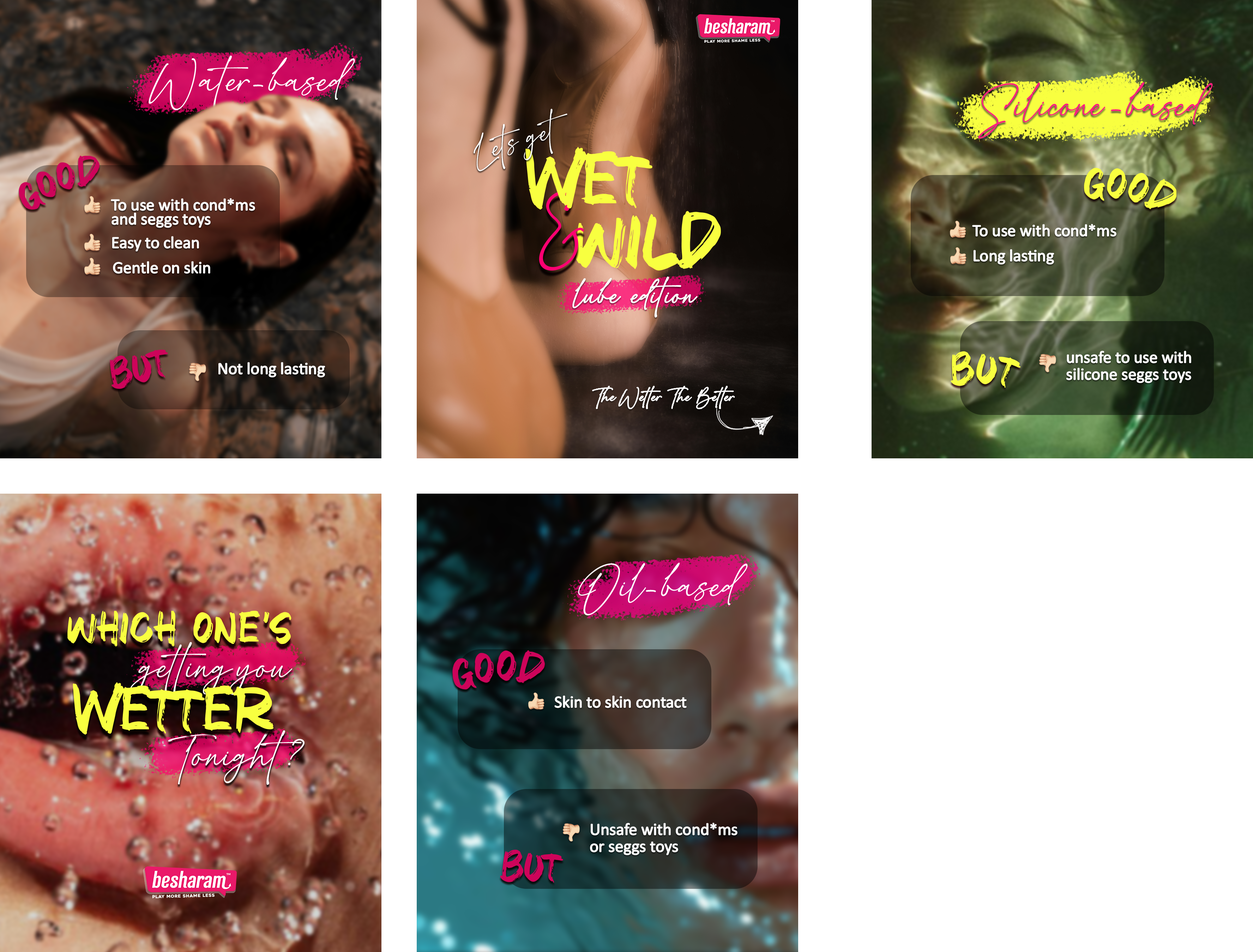
<style>
.page{position:relative;width:1253px;height:952px;background:#ffffff}
.page>*{position:absolute;margin:0}
.t1{font:29px/6.9px "BreathneyDemo";color:#ffffff}
.t2{font:29px/35.3px "BreathneyDemo";color:#fe1f80}
.t3{font:78.7px "Brat-Town";color:#f8ff40}
.t4{font:42.2px "Brat-Town";letter-spacing:-0.025em;color:#cd045a}
.t5{font:45.4px "Brat-Town";letter-spacing:-0.025em;color:#f8ff40}
.t6{font:77.6px "BreathneyDemo";color:#ff0072}
.t7{font:16.9px/14.1px "Calibri";color:#ffffff}
.t8{font:16.9px "Calibri";color:#ffffff}
.t9{font:21.4px/5.1px "BreathneyDemo";color:#ffffff}
.t10{font:43.2px "Brat-Town";color:#cd045a}
.t11{font:16.9px/16.9px "Calibri";color:#ffffff}
.t12{font:12.1px/2.9px "BreathneyDemo";color:#fefefe}
.t13{font:12.1px/2.9px "BreathneyDemo";color:#ffffff}
.t14{font:46.2px "Brat-Town";color:#f8ff40}
.t15{font:29px/49.4px "BreathneyDemo";color:#ffffff}
.t16{font:45.4px "Brat-Town";letter-spacing:-0.025em;color:#cd045a}
.t17{font:65.9px "Brat-Town";color:#f8ff40}
.t18{font:43.5px "Brat-Town";color:#cd045a}
</style>
<div class="page">
<p class="t1" style="left:149px;top:55px;width:206px;height:55px">Water- based</p>
<p class="t2" style="left:978px;top:82px;width:235px;height:57px">Silicone - based</p>
<p class="t3" style="left:525px;top:147px;width:127px;height:63px">Wet</p>
<p class="t4" style="left:19px;top:156px;width:80px;height:54px">good</p>
<p class="t5" style="left:1083px;top:167px;width:94px;height:43px;rotate:35deg">good</p>
<p class="t6" style="left:539px;top:191px;width:45px;height:80px;rotate:-24deg">&amp;</p>
<p class="t7" style="left:111px;top:198px;width:144px;height:30px">To use with cond*ms  <br>and seggs toys</p>
<p class="t3" style="left:575px;top:211px;width:146px;height:60px">wild</p>
<p class="t8" style="left:972px;top:224px;width:144px;height:12px">To use with cond*ms</p>
<p class="t8" style="left:113px;top:236px;width:86px;height:15px">Easy to clean</p>
<p class="t8" style="left:974px;top:249px;width:80px;height:15px">Long lasting</p>
<p class="t8" style="left:113px;top:261px;width:97px;height:12px">Gentle on skin</p>
<p class="t9" style="left:573px;top:277px;width:124px;height:41px">lube   edition</p>
<p class="t10" style="left:110px;top:350px;width:58px;height:39px;rotate:-15deg">but</p>
<p class="t5" style="left:950px;top:351px;width:70px;height:37px">but</p>
<p class="t11" style="left:1066px;top:351px;width:125px;height:32px">unsafe to use with <br>silicone seggs toys</p>
<p class="t8" style="left:219px;top:362px;width:106px;height:15px">Not long lasting</p>
<p class="t12" style="left:592px;top:386px;width:70px;height:23px">The Wetter</p>
<p class="t13" style="left:667px;top:386px;width:68px;height:23px">The  Better</p>
<p class="t1" style="left:578px;top:562px;width:170px;height:53px">Oil- based</p>
<p class="t14" style="left:67px;top:610px;width:224px;height:37px">which one’s</p>
<p class="t15" style="left:129px;top:642px;width:163px;height:55px">getting you</p>
<p class="t16" style="left:452px;top:650px;width:93px;height:40px;rotate:19deg">good</p>
<p class="t17" style="left:73px;top:682px;width:201px;height:53px">Wetter</p>
<p class="t8" style="left:555px;top:696px;width:131px;height:12px">Skin to skin contact</p>
<p class="t15" style="left:168px;top:730px;width:136px;height:55px">Tonight ?</p>
<p class="t11" style="left:590px;top:823px;width:147px;height:32px">Unsafe with cond*ms<br>or seggs toys</p>
<p class="t18" style="left:500px;top:850px;width:63px;height:33px">but</p>
</div>
